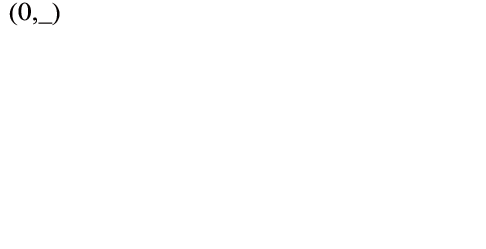
<style>
.page{position:relative;width:486px;height:249px;background:#ffffff}
.page>*{position:absolute;margin:0}
.t1{font:25px "TamilMN";color:#040000}
</style>
<div class="page">
<p class="t1" style="left:9px;top:2px;width:51px;height:24px">(0,_)</p>
</div>
